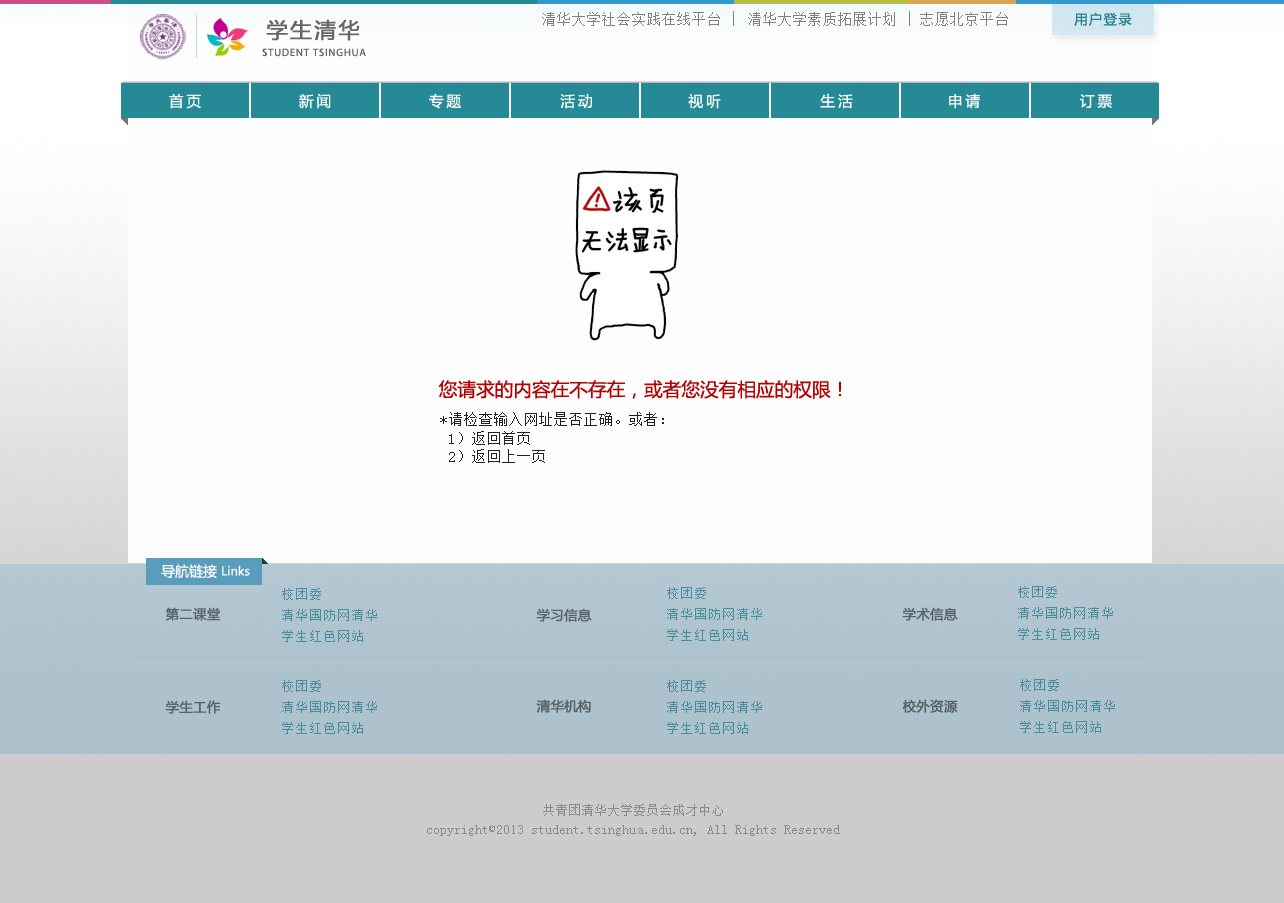
<style>
.page{position:relative;width:1284px;height:903px;background:#fdfdfd}
.page>*{position:absolute;margin:0}
.t1{font:14px "SimSun";letter-spacing:0.075em;color:#808080}
.t2{font:14.7px "SimSun";letter-spacing:0.075em;color:#808080}
.t3{font:13.3px "MicrosoftYaHei";letter-spacing:0.1em;color:#237e89}
.t4{font:21.3px "MicrosoftYaHei";letter-spacing:0.1em;color:#666666;font-weight:bold}
.t5{font:10.7px "MyriadPro-Regular";letter-spacing:0.075em;color:#666666}
.t6{font:14.7px "MicrosoftYaHei";letter-spacing:0.2em;color:#ffffff}
.t7{font:18.7px "MicrosoftYaHei";color:#b10303}
.t8{font:14.7px/18.7px "SimSun";color:#202020}
.t9{font:12px "MicrosoftYaHei";color:#ffffff}
.t10{font:14px "MicrosoftYaHei";color:#ffffff}
.t11{font:13.3px/21.3px "SimSun";letter-spacing:0.075em;color:#488e9a}
.t12{font:13.3px "MicrosoftYaHei";color:#586267;font-weight:bold}
.t13{font:13.3px/21.3px "SimSun";letter-spacing:0.075em;color:#478d99}
.t14{font:13.3px "MicrosoftYaHei";color:#566166;font-weight:bold}
.t15{font:13.3px/18.7px "SimSun";color:#8a8a8a}
</style>
<div class="page">
<p class="t1" style="left:542px;top:11px;width:466px;height:15px">清华大学社会实践在线平台 <span class="t2">| </span>清华大学素质拓展计划 <span class="t2">| </span>志愿北京平台</p>
<p class="t3" style="left:1074px;top:12px;width:58px;height:14px">用户登录</p>
<p class="t4" style="left:266px;top:19px;width:94px;height:22px">学生清华</p>
<p class="t5" style="left:262px;top:48px;width:104px;height:9px">STUDENT TSINGHUA</p>
<p class="t6" style="left:169px;top:93px;width:32px;height:16px">首页</p>
<p class="t6" style="left:299px;top:93px;width:32px;height:16px">新闻</p>
<p class="t6" style="left:429px;top:94px;width:32px;height:15px">专题</p>
<p class="t6" style="left:560px;top:94px;width:32px;height:15px">活动</p>
<p class="t6" style="left:688px;top:94px;width:33px;height:15px">视听</p>
<p class="t6" style="left:820px;top:93px;width:33px;height:16px">生活</p>
<p class="t6" style="left:949px;top:93px;width:31px;height:16px">申请</p>
<p class="t6" style="left:1080px;top:94px;width:32px;height:14px">订票</p>
<p class="t7" style="left:438px;top:380px;width:404px;height:19px">您请求的内容在不存在，或者您没有相应的权限！</p>
<p class="t8" style="left:440px;top:412px;width:224px;height:51px">*请检查输入网址是否正确。或者：<br> 1）返回首页<br> 2）返回上一页</p>
<p class="t9" style="left:161px;top:564px;width:89px;height:15px"><span class="t10">导航链接 </span>Links</p>
<p class="t11" style="left:282px;top:588px;width:95px;height:54px">校团委<br>清华国防网清华<br>学生红色网站</p>
<p class="t11" style="left:667px;top:587px;width:95px;height:54px">校团委<br>清华国防网清华<br>学生红色网站</p>
<p class="t11" style="left:1018px;top:586px;width:95px;height:54px">校团委<br>清华国防网清华<br>学生红色网站</p>
<p class="t12" style="left:165px;top:607px;width:56px;height:14px">第二课堂</p>
<p class="t12" style="left:536px;top:608px;width:56px;height:14px">学习信息</p>
<p class="t12" style="left:902px;top:607px;width:56px;height:14px">学术信息</p>
<p class="t13" style="left:282px;top:680px;width:95px;height:54px">校团委<br>清华国防网清华<br>学生红色网站</p>
<p class="t13" style="left:667px;top:680px;width:95px;height:54px">校团委<br>清华国防网清华<br>学生红色网站</p>
<p class="t13" style="left:1020px;top:679px;width:95px;height:54px">校团委<br>清华国防网清华<br>学生红色网站</p>
<p class="t14" style="left:165px;top:700px;width:56px;height:14px">学生工作</p>
<p class="t14" style="left:536px;top:699px;width:55px;height:14px">清华机构</p>
<p class="t14" style="left:902px;top:699px;width:56px;height:14px">校外资源</p>
<p class="t15" style="left:427px;top:804px;width:413px;height:32px;text-align:center">共青团清华大学委员会成才中心<br>copyright©2013 student.tsinghua.edu.cn, All Rights Reserved</p>
</div>
